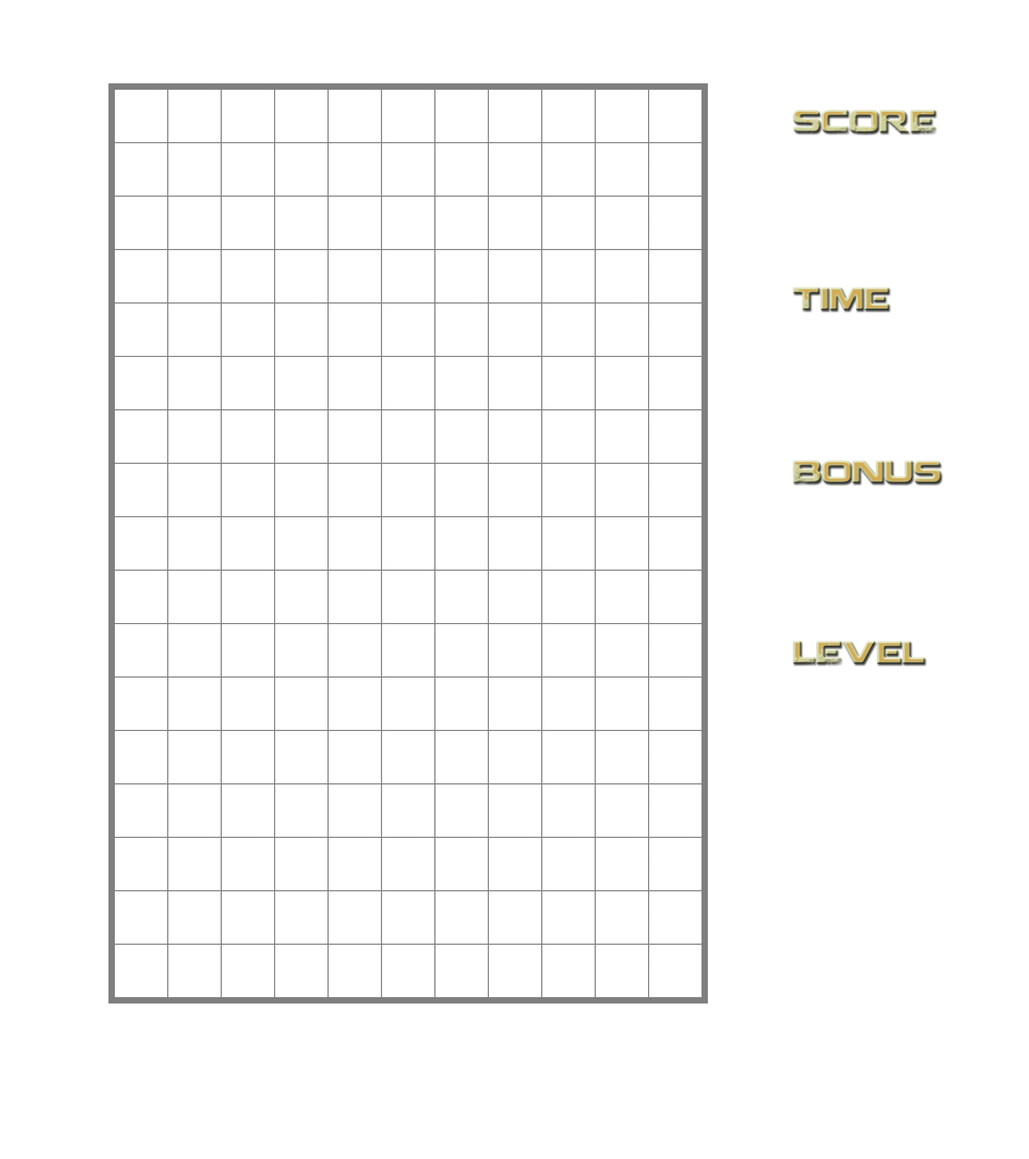
<style>
.page{position:relative;width:1029px;height:1159px;background:#ffffff}
.page>*{position:absolute;margin:0}
.t1{font:31.8px "Coalition";letter-spacing:0.01em}
</style>
<div class="page">
<p class="t1" style="left:793px;top:110px;width:143px;height:23px">SCORE</p>
<p class="t1" style="left:793px;top:287px;width:96px;height:23px">Time</p>
<p class="t1" style="left:793px;top:460px;width:148px;height:24px">Bonus</p>
<p class="t1" style="left:793px;top:641px;width:132px;height:23px">LEvel</p>
</div>
